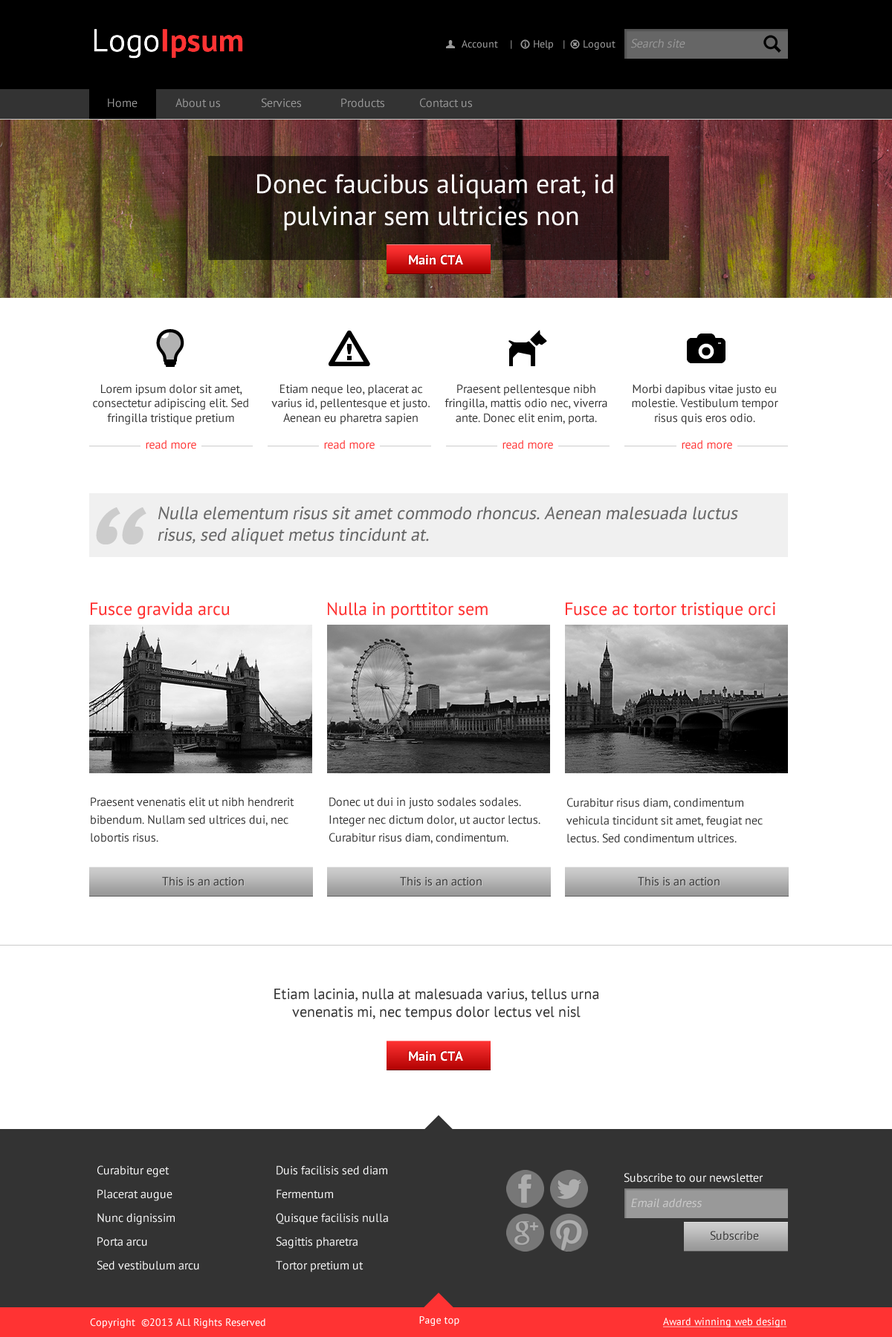
<style>
.page{position:relative;width:892px;height:1337px;background:#ffffff}
.page>*{position:absolute;margin:0}
.t1{font:10.4px "PTSans-Regular";color:#999999}
.t2{font:11.9px "PTSans-Regular";color:#999999;font-style:italic}
.t3{font:11.9px "PTSans-Regular";color:#999999}
.t4{font:26.7px/32.1px "PTSans-Regular";color:#ffffff}
.t5{font:11.9px/14.3px "PTSans-Regular";color:#333333}
.t6{font:11.9px "PTSans-Regular";color:#ff3333}
.t7{font:17.8px/21.4px "PTSans-Regular";color:#666666;font-style:italic}
.t8{font:17.8px "PTSans-Regular";color:#ff3333}
.t9{font:11.9px/17.8px "PTSans-Regular";color:#333333}
.t10{font:11.9px "PTSans-Regular";color:#333333}
.t11{font:14.9px/17.8px "PTSans-Regular";color:#333333}
.t12{font:11.9px/23.8px "PTSans-Regular";color:#ffffff}
.t13{font:11.9px "PTSans-Regular";color:#ffffff}
.t14{font:11.9px "PTSans-Regular";color:#cccccc;font-style:italic}
.t15{font:10.4px "PTSans-Regular";color:#ffffff}
.t16{font:10.4px "PTSans-Regular";color:#ffffff;text-decoration:underline}
</style>
<div class="page">
<p class="t1" style="left:461px;top:40px;width:154px;height:10px">Account    |       Help   |      Logout</p>
<p class="t2" style="left:630px;top:39px;width:55px;height:9px">Search site</p>
<p class="t3" style="left:108px;top:98px;width:29px;height:10px">Home</p>
<p class="t3" style="left:175px;top:98px;width:45px;height:10px">About us</p>
<p class="t3" style="left:261px;top:98px;width:40px;height:10px">Services</p>
<p class="t3" style="left:341px;top:98px;width:43px;height:10px">Products</p>
<p class="t3" style="left:420px;top:98px;width:52px;height:10px">Contact us</p>
<p class="t4" style="left:257px;top:174px;width:356px;height:57px;text-align:center">Donec faucibus aliquam erat, id pulvinar sem ultricies non</p>
<p class="t5" style="left:93px;top:384px;width:155px;height:41px;text-align:center">Lorem ipsum dolor sit amet, consectetur adipiscing elit. Sed fringilla tristique pretium</p>
<p class="t5" style="left:271px;top:384px;width:158px;height:41px;text-align:center">Etiam neque leo, placerat ac varius id, pellentesque et justo. Aenean eu pharetra sapien</p>
<p class="t5" style="left:444px;top:384px;width:163px;height:41px;text-align:center">Praesent pellentesque nibh fringilla, mattis odio nec, viverra ante. Donec elit enim, porta.</p>
<p class="t5" style="left:632px;top:384px;width:146px;height:41px;text-align:center">Morbi dapibus vitae justo eu molestie. Vestibulum tempor risus quis eros odio.</p>
<p class="t6" style="left:146px;top:440px;width:50px;height:10px">read more</p>
<p class="t6" style="left:324px;top:440px;width:50px;height:10px">read more</p>
<p class="t6" style="left:502px;top:440px;width:51px;height:10px">read more</p>
<p class="t6" style="left:681px;top:440px;width:51px;height:10px">read more</p>
<p class="t7" style="left:158px;top:507px;width:580px;height:38px">Nulla elementum risus sit amet commodo rhoncus. Aenean malesuada luctus risus, sed aliquet metus tincidunt at.</p>
<p class="t8" style="left:91px;top:603px;width:139px;height:16px">Fusce gravida arcu</p>
<p class="t8" style="left:328px;top:603px;width:159px;height:16px">Nulla in porttitor sem</p>
<p class="t8" style="left:565px;top:603px;width:210px;height:16px">Fusce ac tortor tristique orci</p>
<p class="t9" style="left:91px;top:797px;width:203px;height:46px">Praesent venenatis elit ut nibh hendrerit bibendum. Nullam sed ultrices dui, nec lobortis risus.</p>
<p class="t9" style="left:329px;top:797px;width:211px;height:47px">Donec ut dui in justo sodales sodales. Integer nec dictum dolor, ut auctor lectus. Curabitur risus diam, condimentum.</p>
<p class="t9" style="left:566px;top:798px;width:196px;height:45px">Curabitur risus diam, condimentum vehicula tincidunt sit amet, feugiat nec lectus. Sed condimentum ultrices.</p>
<p class="t10" style="left:162px;top:877px;width:82px;height:9px">This is an action</p>
<p class="t10" style="left:400px;top:877px;width:81px;height:9px">This is an action</p>
<p class="t10" style="left:637px;top:877px;width:82px;height:9px">This is an action</p>
<p class="t11" style="left:274px;top:988px;width:325px;height:32px;text-align:center">Etiam lacinia, nulla at malesuada varius, tellus urna venenatis mi, nec tempus dolor lectus vel nisl</p>
<p class="t12" style="left:97px;top:1166px;width:102px;height:105px">Curabitur eget<br>Placerat augue<br>Nunc dignissim<br>Porta arcu<br>Sed vestibulum arcu</p>
<p class="t12" style="left:276px;top:1166px;width:112px;height:107px">Duis facilisis sed diam<br>Fermentum<br>Quisque facilisis nulla<br>Sagittis pharetra<br>Tortor pretium ut</p>
<p class="t13" style="left:623px;top:1173px;width:140px;height:10px">Subscribe to our newsletter</p>
<p class="t14" style="left:631px;top:1198px;width:70px;height:10px">Email address</p>
<p class="t10" style="left:710px;top:1231px;width:49px;height:10px">Subscribe</p>
<p class="t15" style="left:90px;top:1319px;width:175px;height:9px">Copyright  ©2013 ALl Rights Reserved</p>
<p class="t15" style="left:419px;top:1317px;width:40px;height:9px">Page top</p>
<p class="t16" style="left:663px;top:1318px;width:124px;height:10px">Award winning web design</p>
</div>
